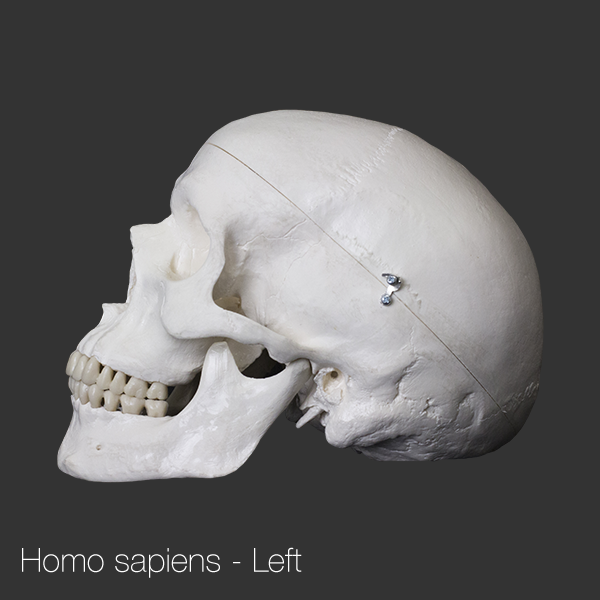
<style>
.page{position:relative;width:600px;height:600px;background:#333333}
.page>*{position:absolute;margin:0}
.t1{font:33.3px "HelveticaNeue-Thin";color:#ffffff}
</style>
<div class="page">
<p class="t1" style="left:22px;top:547px;width:280px;height:31px">Homo sapiens - Left</p>
</div>
